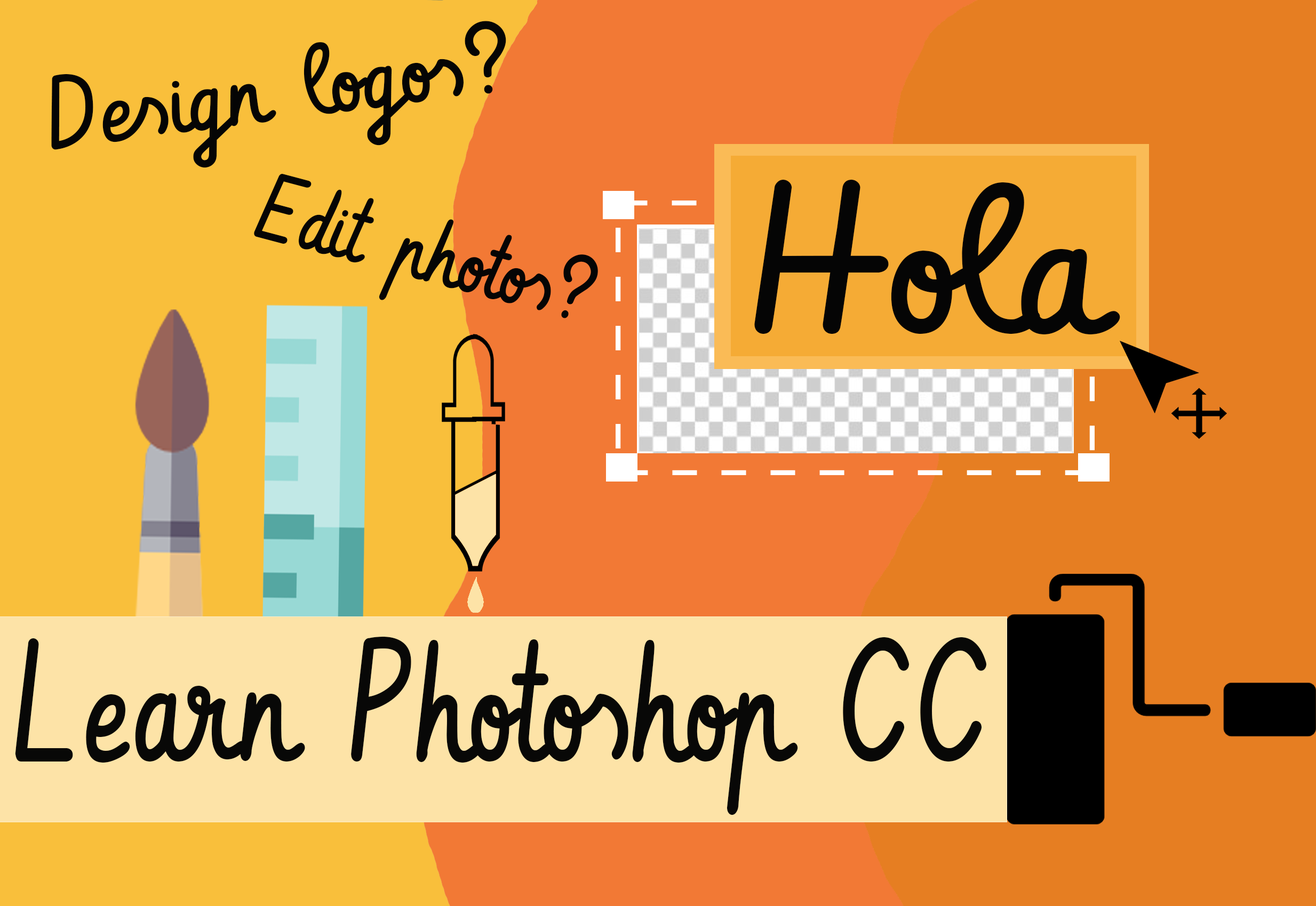
<style>
.page{position:relative;width:1316px;height:906px;background:#f9bf3b}
.page>*{position:absolute;margin:0}
.t1{font:96.9px "Vibur";color:#050505;scale:1.04 1}
.t2{font:89.1px "Vibur";color:#050505;scale:0.94 1}
.t3{font:203.2px "Vibur";color:#050505;scale:1.1 1}
.t4{font:162.7px "Vibur";color:#080807;scale:0.86 1}
</style>
<div class="page">
<p class="t1" style="left:51px;top:21px;width:455px;height:147px;rotate:-7deg">Design logos?</p>
<p class="t2" style="left:254px;top:174px;width:344px;height:144px;rotate:15deg">Edit photos?</p>
<p class="t3" style="left:754px;top:180px;width:366px;height:154px">Hola</p>
<p class="t4" style="left:15px;top:637px;width:971px;height:179px">Learn Photoshop CC</p>
</div>
